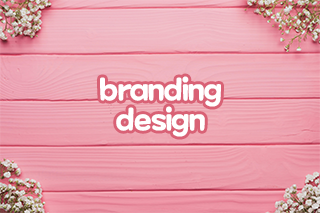
<style>
.page{position:relative;width:320px;height:213px}
.page>*{position:absolute;margin:0}
.t1{font:30px/30px "MaplestoryBold";letter-spacing:-0.025em;color:#ffffff}
</style>
<div class="page">
<p class="t1" style="left:100px;top:76px;width:121px;height:61px;text-align:center">branding<br>design</p>
</div>
